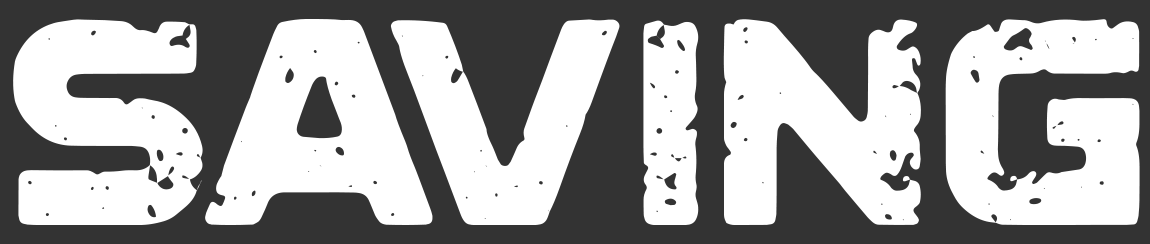
<style>
.page{position:relative;width:1150px;height:244px;background:#ffffff}
.page>*{position:absolute;margin:0}
.t1{font:300px "GrindDemolished";color:#ffffff}
</style>
<div class="page">
<p class="t1" style="left:13px;top:19px;width:1127px;height:206px">saving</p>
</div>
